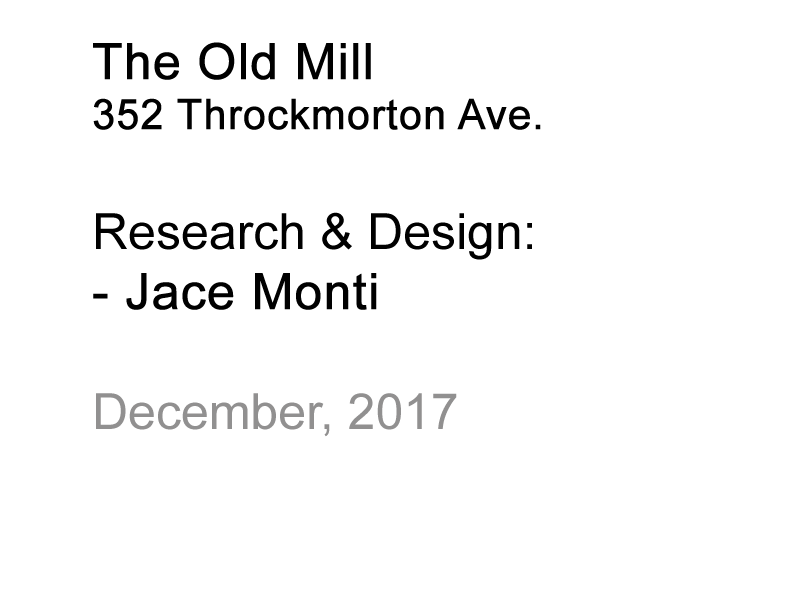
<style>
.page{position:relative;width:800px;height:600px;background:#ffffff}
.page>*{position:absolute;margin:0}
.t1{font:41.7px "ArialMT";color:#000000;font-weight:bold}
.t2{font:50px "ArialMT";color:#000000;font-weight:bold}
.t3{font:50px "ArialMT";color:#000000}
.t4{font:50px "ArialMT";color:#919090}
</style>
<div class="page">
<p class="t1" style="left:93px;top:42px;width:448px;height:395px"><span class="t2">The Old Mill<br></span>352 Throckmorton Ave.<br><span class="t3"><br>Research &amp; Design:<br></span><span class="t2">- Jace Monti<br><br></span><span class="t4">December, 2017</span></p>
</div>
